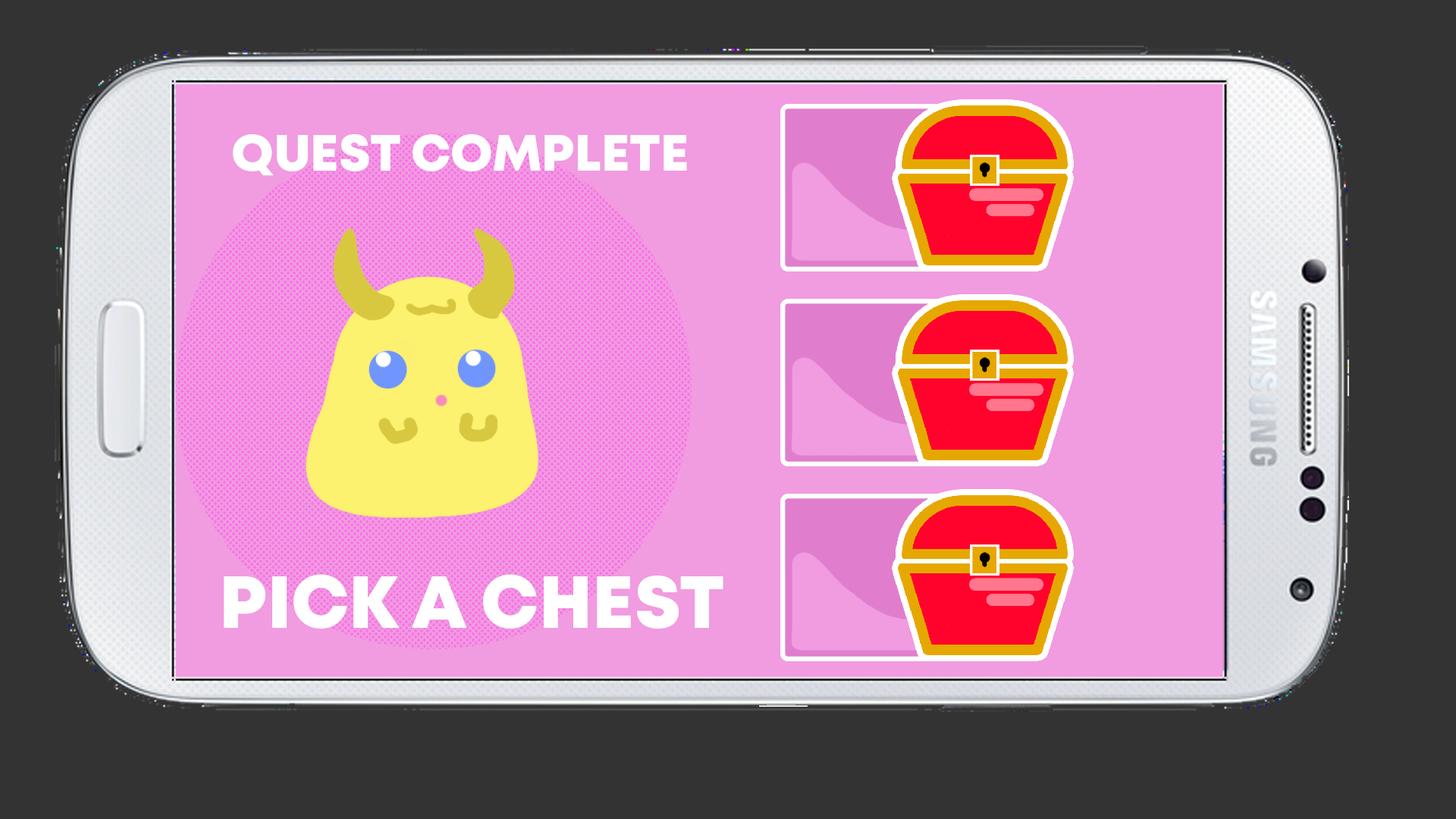
<style>
.page{position:relative;width:1456px;height:819px;background:#333333}
.page>*{position:absolute;margin:0}
.t1{font:50.6px "Mont-HeavyDEMO";color:#ffffff}
.t2{font:73.7px "Mont-HeavyDEMO";color:#ffffff}
</style>
<div class="page">
<p class="t1" style="left:233px;top:134px;width:454px;height:42px">QUEST COMPLETE</p>
<p class="t2" style="left:224px;top:574px;width:499px;height:55px">PICK A CHEST</p>
</div>
